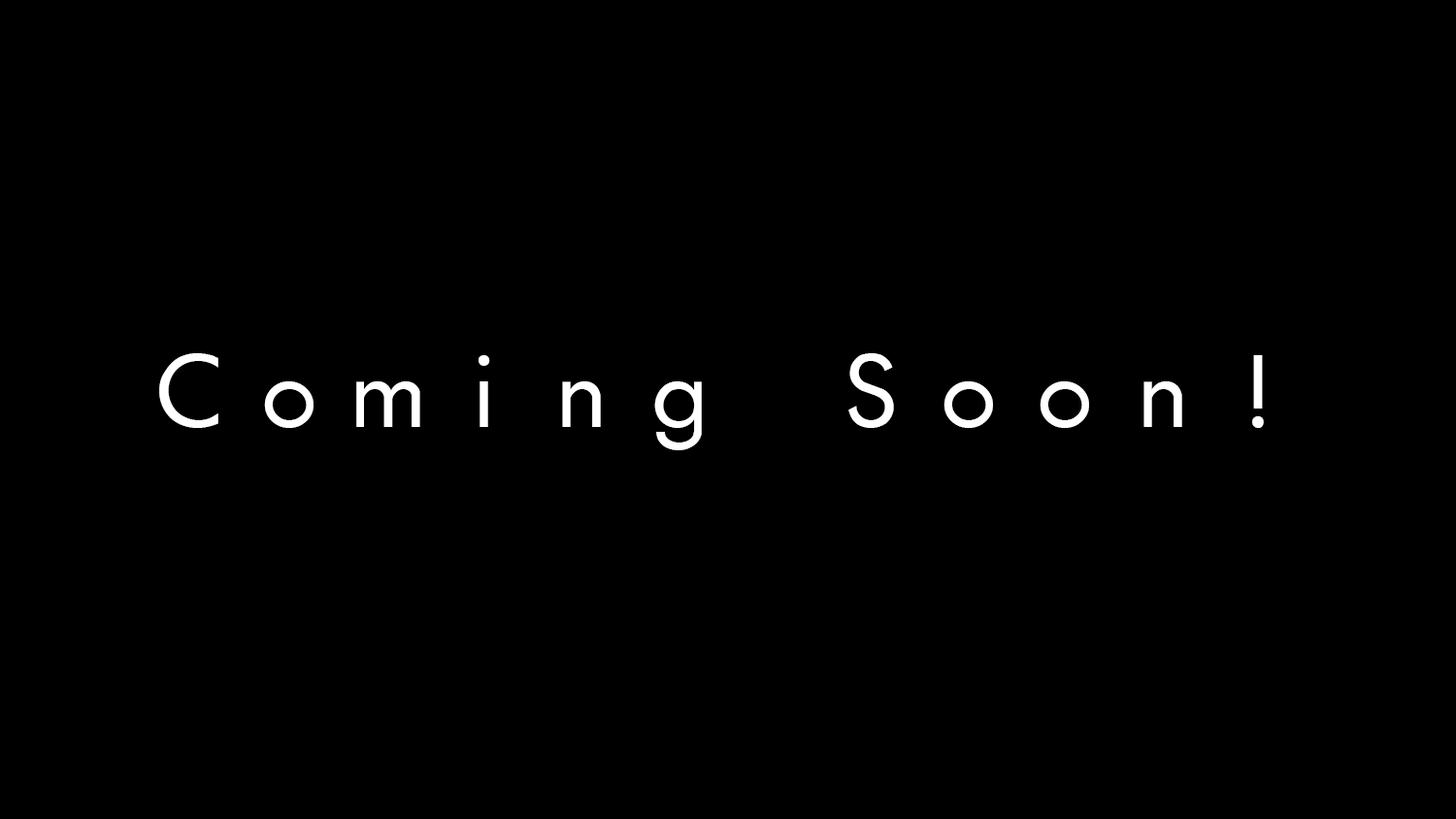
<style>
.page{position:relative;width:1456px;height:819px;background:#000000}
.page>*{position:absolute;margin:0}
.t1{font:97px "FuturistFixedWidth-Regular";color:#ffffff}
</style>
<div class="page">
<p class="t1" style="left:159px;top:353px;width:1105px;height:97px">Coming Soon!</p>
</div>
